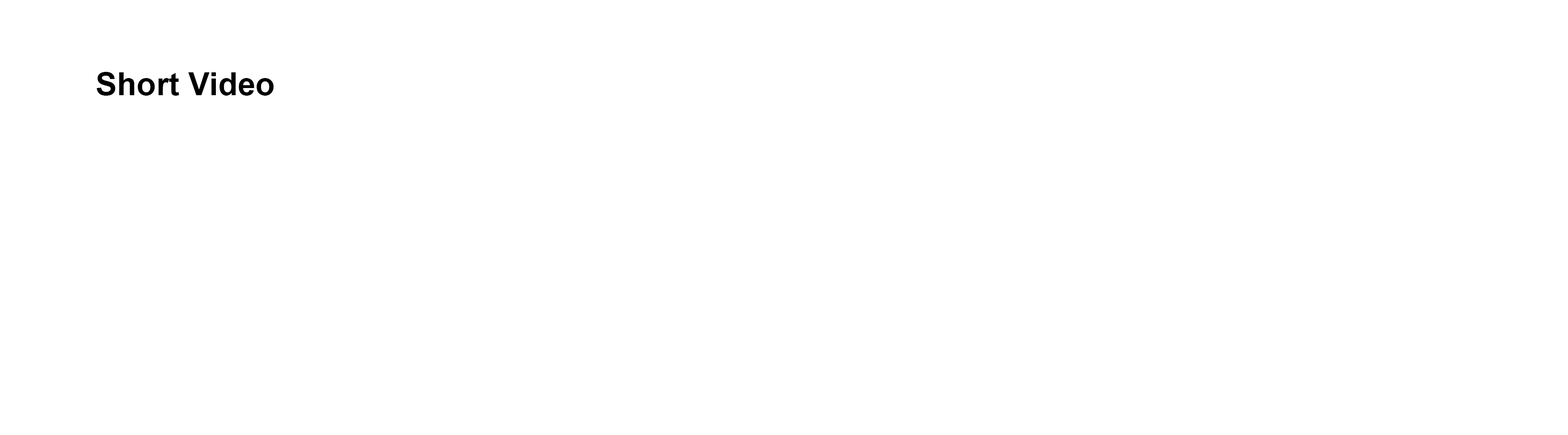
<style>
.page{position:relative;width:1568px;height:435px;background:#ffffff}
.page>*{position:absolute;margin:0}
.t1{font:32.1px "Arial-BoldMT";color:#000000}
</style>
<div class="page">
<p class="t1" style="left:97px;top:72px;width:177px;height:24px">Short Video</p>
</div>
